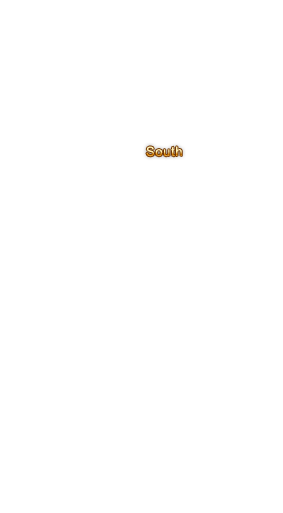
<style>
.page{position:relative;width:283px;height:513px;background:#ffffff}
.page>*{position:absolute;margin:0}
.t1{font:13px "ArialMT";letter-spacing:0.05em}
</style>
<div class="page">
<p class="t1" style="left:146px;top:146px;width:36px;height:11px">South</p>
</div>
